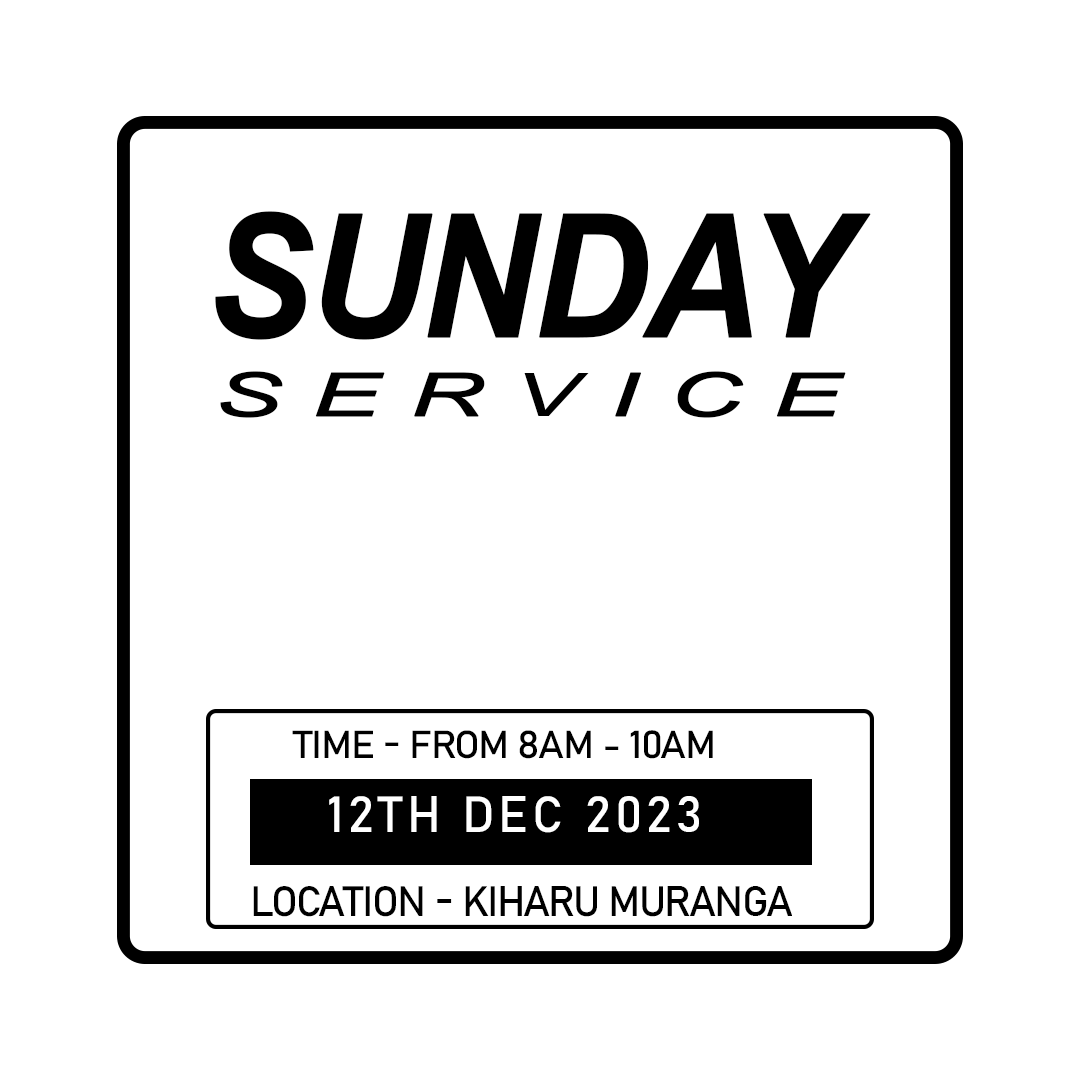
<style>
.page{position:relative;width:1080px;height:1080px;background:#ffffff}
.page>*{position:absolute;margin:0}
.t1{font:170.7px "Arial-BoldItalicMT";letter-spacing:-0.04em;color:#000000;font-weight:bold;scale:0.93 1}
.t2{font:60.3px "Arial-ItalicMT";letter-spacing:0.28em;color:#000000;font-weight:bold;scale:1.67 1}
.t3{font:38.4px "Bahnschrift";letter-spacing:-0.04em;color:#000000;font-weight:bold;scale:1.05 1}
.t4{font:50px "Bahnschrift";letter-spacing:0.08em;color:#ffffff;font-weight:bold}
.t5{font:41.7px "Bahnschrift";letter-spacing:-0.04em;color:#000000;font-weight:bold}
</style>
<div class="page">
<p class="t1" style="left:215px;top:211px;width:656px;height:129px">SUNDAY</p>
<p class="t2" style="left:220px;top:371px;width:626px;height:47px">SERVICE</p>
<p class="t3" style="left:292px;top:730px;width:421px;height:29px">TIME - FROM 8AM - 10AM</p>
<p class="t4" style="left:329px;top:796px;width:370px;height:37px">12TH DEC 2023</p>
<p class="t5" style="left:253px;top:886px;width:539px;height:31px">LOCATION - KIHARU MURANGA</p>
</div>
